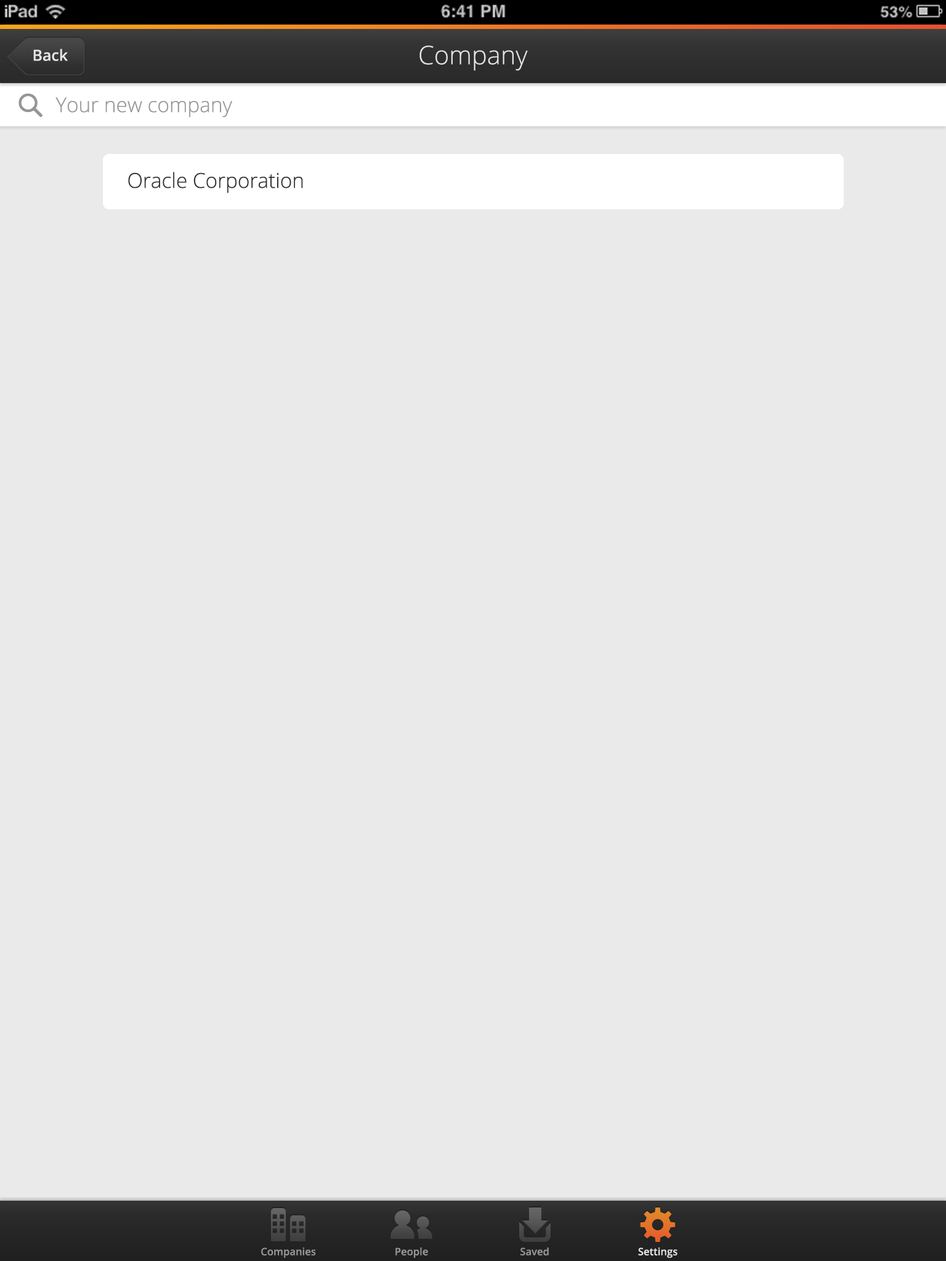
<style>
.page{position:relative;width:946px;height:1261px;background:#eaeaea}
.page>*{position:absolute;margin:0}
.t1{font:15.4px "OpenSans-Semibold";color:#e5e5e5}
.t2{font:25.7px "OpenSans-Light";color:#e5e5e5}
.t3{font:20.5px "OpenSans-Light";color:#969696}
.t4{font:20.5px "OpenSans-Light";color:#343434}
.t5{font:10.3px "OpenSans-Semibold";color:#969696}
.t6{font:10.3px "OpenSans-Semibold";color:#e5e5e5}
</style>
<div class="page">
<p class="t1" style="left:33px;top:49px;width:35px;height:12px">Back</p>
<p class="t2" style="left:419px;top:46px;width:109px;height:25px">Company</p>
<p class="t3" style="left:55px;top:97px;width:177px;height:21px">Your new company</p>
<p class="t4" style="left:128px;top:172px;width:175px;height:21px">Oracle Corporation</p>
<p class="t5" style="left:261px;top:1247px;width:55px;height:11px">Companies</p>
<p class="t5" style="left:395px;top:1247px;width:33px;height:11px">People</p>
<p class="t5" style="left:520px;top:1247px;width:29px;height:8px">Saved</p>
<p class="t6" style="left:638px;top:1247px;width:39px;height:11px">Settings</p>
</div>
